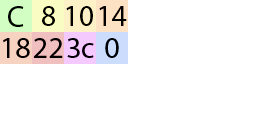
<style>
.page{position:relative;width:256px;height:128px;background:#ffffff}
.page>*{position:absolute;margin:0}
.t1{font:30px "MyriadPro-Regular";color:#000000}
</style>
<div class="page">
<p class="t1" style="left:8px;top:6px;width:16px;height:21px">C</p>
<p class="t1" style="left:42px;top:6px;width:13px;height:20px">8</p>
<p class="t1" style="left:66px;top:6px;width:27px;height:20px">10</p>
<p class="t1" style="left:99px;top:6px;width:28px;height:20px">14</p>
<p class="t1" style="left:3px;top:38px;width:27px;height:20px">18</p>
<p class="t1" style="left:34px;top:38px;width:29px;height:20px">22</p>
<p class="t1" style="left:67px;top:38px;width:27px;height:20px">3c</p>
<p class="t1" style="left:105px;top:38px;width:14px;height:20px">0</p>
</div>
